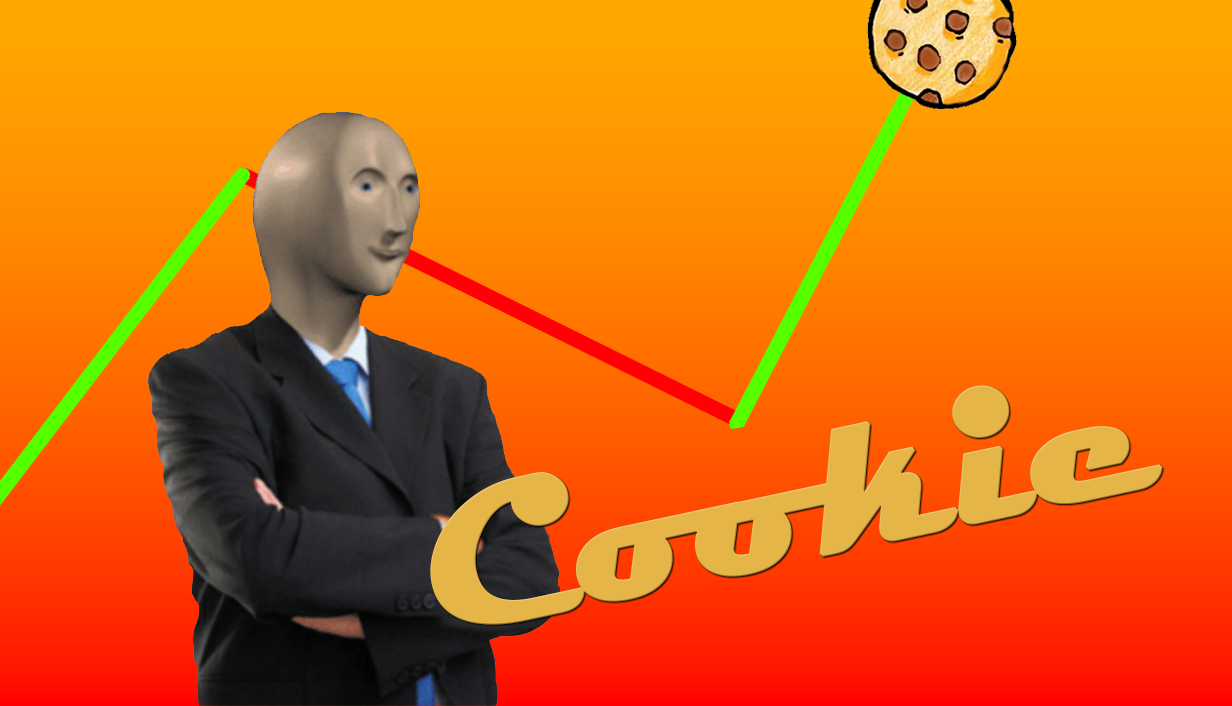
<style>
.page{position:relative;width:1232px;height:706px}
.page>*{position:absolute;margin:0}
.t1{font:200px "Magneto-Bold";color:#e5b647;font-weight:bold}
</style>
<div class="page">
<p class="t1" style="left:430px;top:385px;width:733px;height:240px;rotate:-12deg">Cookie</p>
</div>
